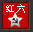
<style>
.page{position:relative;width:33px;height:32px;background:#c50000}
.page>*{position:absolute;margin:0}
.t1{font:10.4px "SimSun";color:#ffffff}
</style>
<div class="page">
<p class="t1" style="left:6px;top:4px;width:19px;height:9px">红六</p>
</div>
